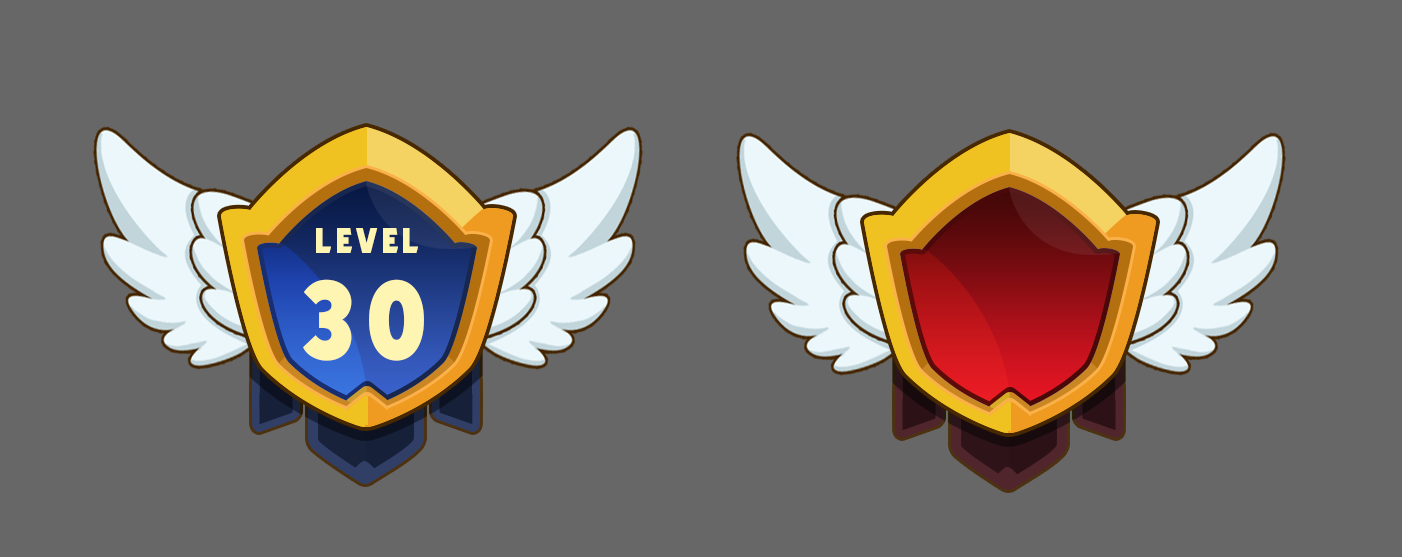
<style>
.page{position:relative;width:1402px;height:557px;background:#676767}
.page>*{position:absolute;margin:0}
.t1{font:34.6px "UTM-Kabel-KT";letter-spacing:0.1em;color:#fff5b2}
.t2{font:113.8px "UTM-Kabel-KT";letter-spacing:0.1em;color:#fff5b2}
</style>
<div class="page">
<p class="t1" style="left:316px;top:228px;width:102px;height:25px">LEVEL</p>
<p class="t2" style="left:303px;top:279px;width:121px;height:82px">30</p>
</div>
